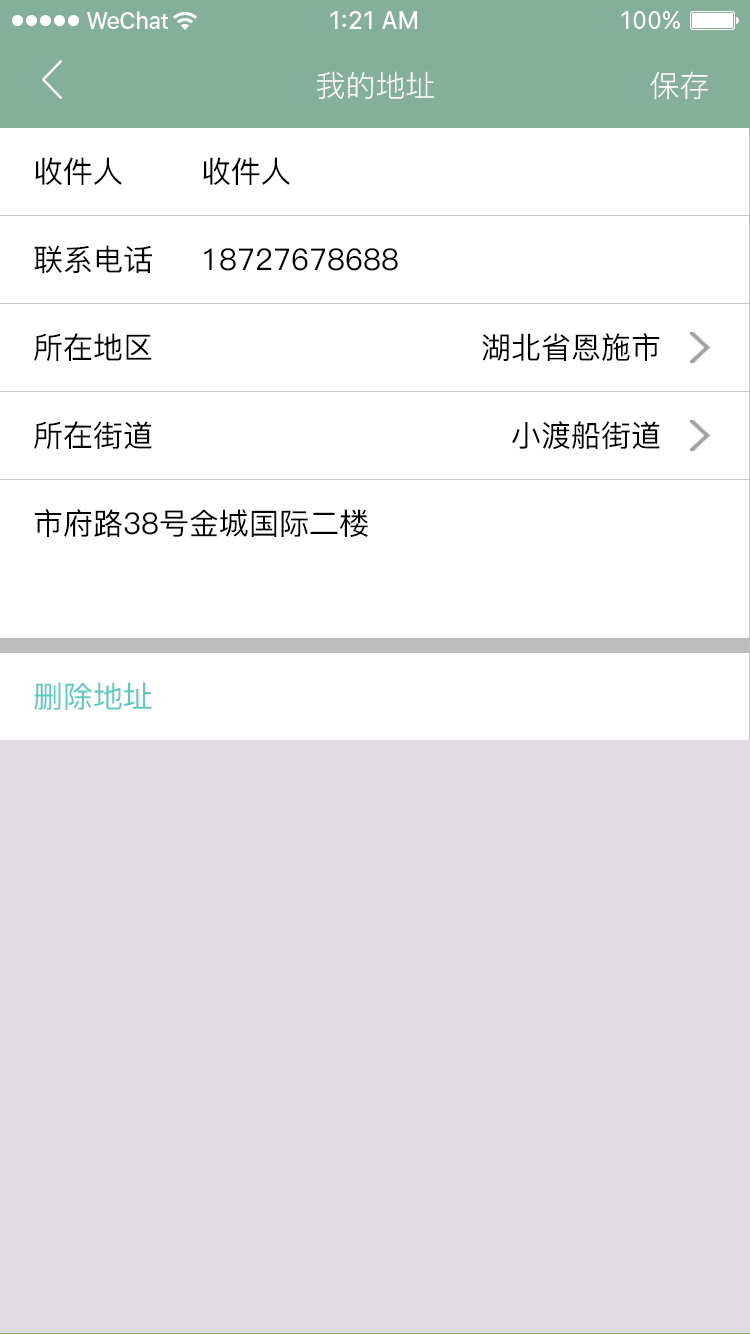
<style>
.page{position:relative;width:750px;height:1334px;background:#ffffff}
.page>*{position:absolute;margin:0}
.t1{font:30px "PingFang-SC-Regular";color:#ffffff;text-transform:uppercase}
.t2{font:30px "PingFang-SC-Medium";color:#010101;text-transform:uppercase}
.t3{font:30px "PingFang-SC-Medium";color:#5ccbbc;text-transform:uppercase}
</style>
<div class="page">
<p class="t1" style="left:317px;top:71px;width:117px;height:28px">我的地址</p>
<p class="t1" style="left:650px;top:71px;width:58px;height:29px">保存</p>
<p class="t2" style="left:35px;top:157px;width:87px;height:28px">收件人</p>
<p class="t2" style="left:203px;top:157px;width:87px;height:28px">收件人</p>
<p class="t2" style="left:34px;top:245px;width:118px;height:29px">联系电话</p>
<p class="t2" style="left:204px;top:248px;width:194px;height:23px">18727678688</p>
<p class="t2" style="left:34px;top:333px;width:118px;height:28px">所在地区</p>
<p class="t2" style="left:482px;top:333px;width:178px;height:28px">湖北省恩施市</p>
<p class="t2" style="left:34px;top:421px;width:118px;height:28px">所在街道</p>
<p class="t2" style="left:512px;top:421px;width:148px;height:29px">小渡船街道</p>
<p class="t2" style="left:34px;top:509px;width:334px;height:28px">市府路38号金城国际二楼</p>
<p class="t3" style="left:34px;top:682px;width:118px;height:28px">删除地址</p>
</div>
